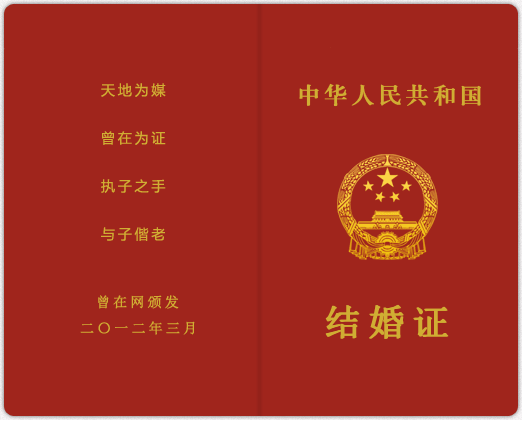
<style>
.page{position:relative;width:522px;height:421px;background:#a0251c}
.page>*{position:absolute;margin:0}
.t1{font:14px/48px "MicrosoftYaHei";letter-spacing:0.2em;color:#d0ae33}
.t2{font:14px "SimSun";letter-spacing:0.2em;color:#d0ae33;font-weight:bold}
.t3{font:36px "SimSun";letter-spacing:0.2em;color:#d0ae33;font-weight:bold}
.t4{font:36px "SimSun";font-weight:bold}
</style>
<div class="page">
<p class="t1" style="left:101px;top:83px;width:65px;height:158px">天地为媒<br>曾在为证<br>执子之手<br>与子偕老</p>
<p class="t2" style="left:98px;top:295px;width:81px;height:14px">曾在网颁发</p>
<p class="t3" style="left:325px;top:304px;width:123px;height:35px">结婚证</p>
<p class="t3" style="left:326px;top:304px;width:123px;height:35px">结婚证</p>
<p class="t4" style="left:334px;top:304px;width:108px;height:35px">结婚证</p>
<p class="t2" style="left:80px;top:321px;width:115px;height:14px">二〇一二年三月</p>
</div>
